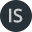
<style>
.page{position:relative;width:32px;height:32px;background:#263238}
.page>*{position:absolute;margin:0}
.t1{font:18.7px "OpenSans-Semibold";color:#cacaca}
</style>
<div class="page">
<p class="t1" style="left:9px;top:8px;width:14px;height:15px">IS</p>
</div>
